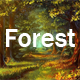
<style>
.page{position:relative;width:80px;height:80px}
.page>*{position:absolute;margin:0}
.t1{font:27.1px "FranklinGothic-Medium";color:#ffffff}
</style>
<div class="page">
<p class="t1" style="left:6px;top:29px;width:69px;height:18px">Forest</p>
</div>
